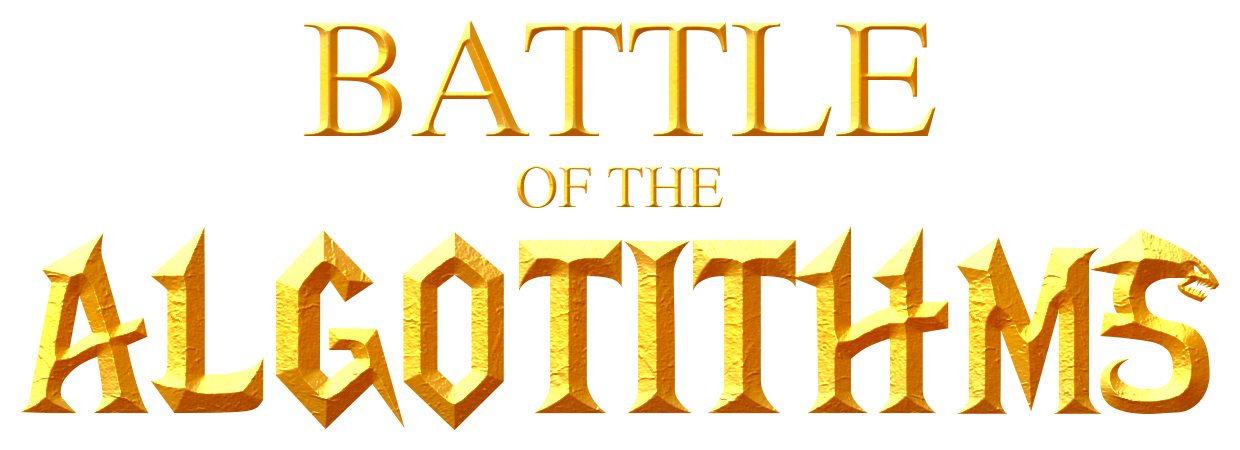
<style>
.page{position:relative;width:1240px;height:450px;background:#ffffff}
.page>*{position:absolute;margin:0}
.t1{font:170px "STIXGeneral-Regular"}
.t2{font:60px "STIXGeneral-Regular"}
.t3{font:300px "LifeCraft"}
</style>
<div class="page">
<p class="t1" style="left:303px;top:20px;width:633px;height:117px">BATTLE</p>
<p class="t2" style="left:517px;top:166px;width:206px;height:42px">OF THE</p>
<p class="t3" style="left:20px;top:226px;width:1200px;height:204px">algotithms</p>
</div>
